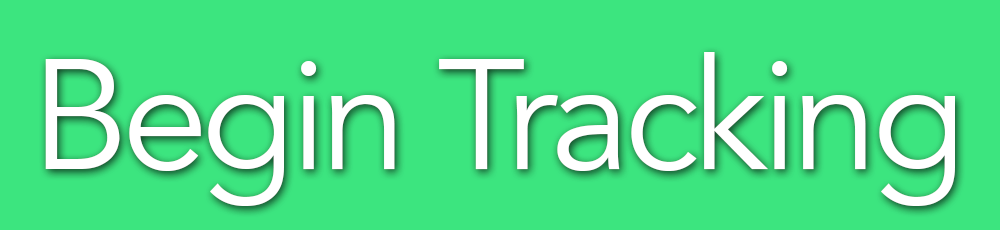
<style>
.page{position:relative;width:1000px;height:230px;background:#3ce57f}
.page>*{position:absolute;margin:0}
.t1{font:154.5px "Avenir-Book";letter-spacing:-0.04em;color:#ffffff}
</style>
<div class="page">
<p class="t1" style="left:45px;top:52px;width:910px;height:154px">Begin Tracking</p>
</div>
